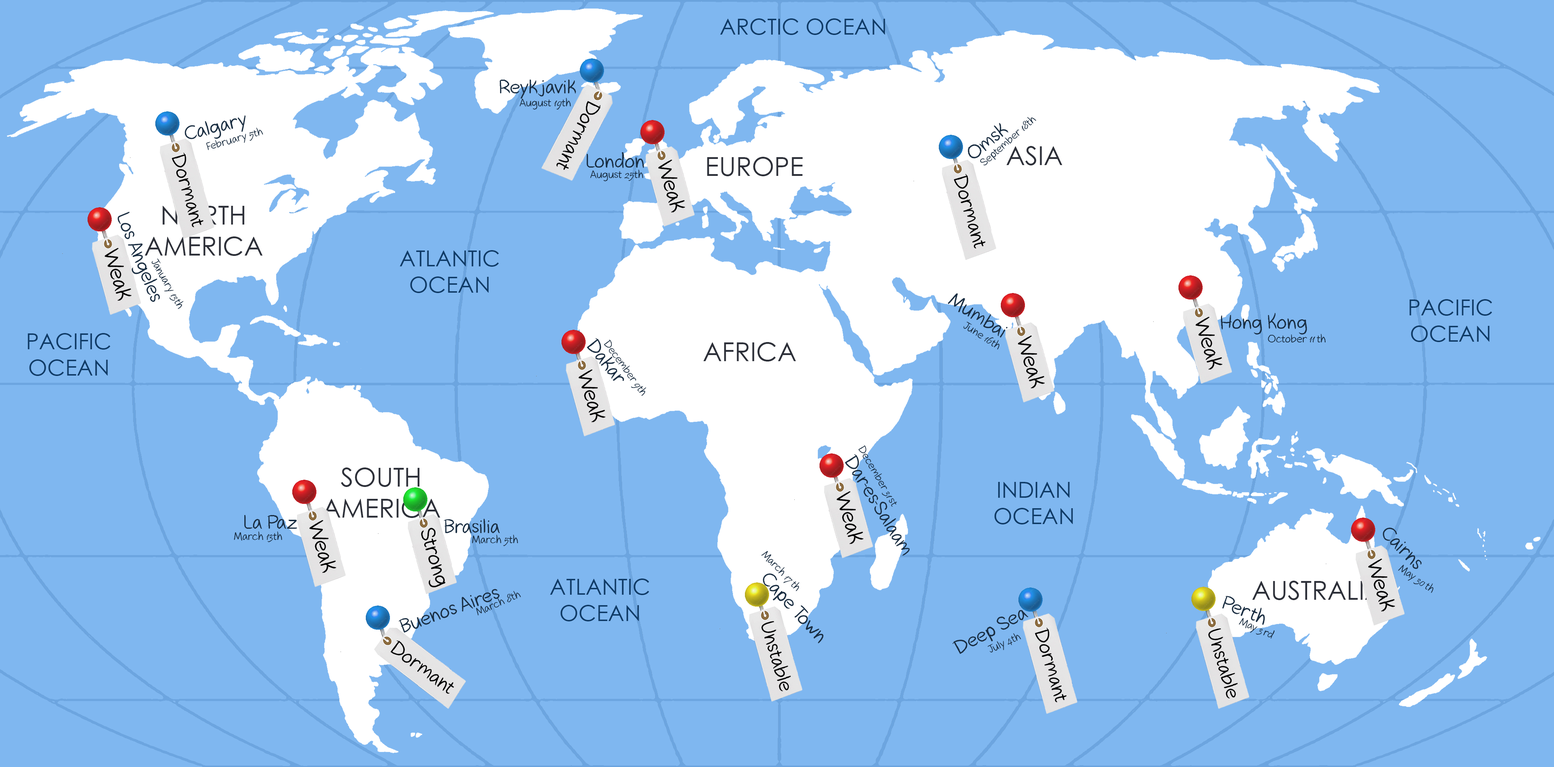
<style>
.page{position:relative;width:1554px;height:767px;background:#7fb7f0}
.page>*{position:absolute;margin:0}
.t1{font:22px "CenturyGothic";color:#0f3b67}
.t2{font:19.5px "GavinScript2";color:#182d42}
.t3{font:10.8px "GavinScript2";color:#182d42}
.t4{font:10.8px "Pristina-Regular";color:#182d42}
.t5{font:20px "GavinScript2";color:#000000}
.t6{font:19.4px "GavinScript2";color:#182d42}
.t7{font:10.7px "GavinScript2";color:#182d42}
.t8{font:10.7px "Pristina-Regular";color:#182d42}
.t9{font:26px "CenturyGothic";color:#2d3039}
.t10{font:19.8px "GavinScript2";color:#000000}
.t11{font:21.9px "GavinScript2";color:#000000}
.t12{font:19.6px "GavinScript2";color:#182d42}
.t13{font:10.9px "GavinScript2";color:#182d42}
.t14{font:10.9px "Pristina-Regular";color:#182d42}
.t15{font:19.3px "GavinScript2";color:#182d42}
.t16{font:20.9px "GavinScript2";color:#000000}
</style>
<div class="page">
<p class="t1" style="left:720px;top:18px;width:165px;height:17px">ARCTIC OCEAN</p>
<p class="t2" style="left:500px;top:79px;width:76px;height:20px">Reykjavik</p>
<p class="t3" style="left:519px;top:98px;width:52px;height:12px">August <span class="t4">19</span>th</p>
<p class="t5" style="left:556px;top:101px;width:45px;height:69px;rotate:116deg">Dormant</p>
<p class="t6" style="left:185px;top:115px;width:61px;height:25px;rotate:-15deg">Calgary</p>
<p class="t2" style="left:968px;top:123px;width:41px;height:36px;rotate:-40deg">Omsk</p>
<p class="t3" style="left:980px;top:117px;width:57px;height:48px;rotate:-42deg">September <span class="t4">18</span>th</p>
<p class="t7" style="left:206px;top:128px;width:57px;height:22px;rotate:-16deg">February <span class="t8">5</span>th</p>
<p class="t9" style="left:1006px;top:146px;width:57px;height:19px">ASIA</p>
<p class="t10" style="left:172px;top:152px;width:32px;height:75px;rotate:73deg">Dormant</p>
<p class="t2" style="left:587px;top:152px;width:57px;height:16px">London</p>
<p class="t11" style="left:658px;top:159px;width:27px;height:54px;rotate:73deg">Weak</p>
<p class="t9" style="left:707px;top:157px;width:96px;height:19px">EUROPE</p>
<p class="t3" style="left:590px;top:169px;width:53px;height:12px">August <span class="t4">25</span>th</p>
<p class="t10" style="left:954px;top:174px;width:32px;height:75px;rotate:73deg">Dormant</p>
<p class="t9" style="left:145px;top:205px;width:118px;height:51px;text-align:center">NORTH<br>AMERICA</p>
<p class="t12" style="left:118px;top:212px;width:42px;height:90px;rotate:68deg">Los Angeles</p>
<p class="t11" style="left:105px;top:248px;width:27px;height:53px;rotate:73deg">Weak</p>
<p class="t1" style="left:400px;top:250px;width:99px;height:43px;text-align:center">ATLANTIC<br>OCEAN</p>
<p class="t3" style="left:151px;top:258px;width:32px;height:51px;rotate:60deg">January <span class="t4">13</span>th</p>
<p class="t6" style="left:948px;top:293px;width:60px;height:45px;rotate:33deg">Mumbai</p>
<p class="t1" style="left:1410px;top:299px;width:82px;height:43px;text-align:center">PACIFIC<br>OCEAN</p>
<p class="t11" style="left:1196px;top:317px;width:27px;height:53px;rotate:73deg">Weak</p>
<p class="t2" style="left:1221px;top:313px;width:86px;height:22px">Hong Kong</p>
<p class="t13" style="left:964px;top:322px;width:36px;height:28px;rotate:32deg">June <span class="t14">16</span>th</p>
<p class="t1" style="left:28px;top:333px;width:82px;height:43px;text-align:center">PACIFIC<br>OCEAN</p>
<p class="t2" style="left:587px;top:338px;width:37px;height:43px;rotate:52deg">Dakar</p>
<p class="t3" style="left:604px;top:339px;width:42px;height:57px;rotate:54deg">December <span class="t4">9</span>th</p>
<p class="t11" style="left:1018px;top:335px;width:27px;height:54px;rotate:73deg">Weak</p>
<p class="t3" style="left:1268px;top:334px;width:58px;height:8px">October <span class="t4">11 </span>th</p>
<p class="t9" style="left:703px;top:342px;width:93px;height:20px">AFRICA</p>
<p class="t11" style="left:579px;top:369px;width:27px;height:53px;rotate:73deg">Weak</p>
<p class="t3" style="left:859px;top:445px;width:38px;height:62px;rotate:60deg">December <span class="t4">31 </span>st</p>
<p class="t15" style="left:845px;top:454px;width:65px;height:102px;rotate:58deg">Dar-es-Salaam</p>
<p class="t9" style="left:322px;top:468px;width:119px;height:50px;text-align:center">SOUTH<br>AMERICA</p>
<p class="t1" style="left:995px;top:482px;width:78px;height:43px;text-align:center">INDIAN<br>OCEAN</p>
<p class="t11" style="left:837px;top:491px;width:27px;height:53px;rotate:73deg">Weak</p>
<p class="t2" style="left:244px;top:515px;width:53px;height:14px">La Paz</p>
<p class="t11" style="left:309px;top:520px;width:27px;height:53px;rotate:73deg">Weak</p>
<p class="t2" style="left:444px;top:519px;width:56px;height:14px">Brasilia</p>
<p class="t3" style="left:234px;top:531px;width:48px;height:11px">March <span class="t4">13</span>th</p>
<p class="t16" style="left:421px;top:528px;width:25px;height:60px;rotate:73deg">Strong</p>
<p class="t12" style="left:1383px;top:527px;width:39px;height:42px;rotate:46deg">Cairns</p>
<p class="t3" style="left:472px;top:535px;width:46px;height:11px">March <span class="t4">5</span>th</p>
<p class="t3" style="left:761px;top:551px;width:39px;height:41px;rotate:46deg">March <span class="t4">17 </span>th</p>
<p class="t11" style="left:1368px;top:558px;width:27px;height:54px;rotate:73deg">Weak</p>
<p class="t3" style="left:1398px;top:565px;width:36px;height:28px;rotate:34deg">May <span class="t4">30 </span>th</p>
<p class="t1" style="left:550px;top:579px;width:99px;height:42px;text-align:center">ATLANTIC<br>OCEAN</p>
<p class="t6" style="left:763px;top:573px;width:61px;height:70px;rotate:47deg">Cape Town</p>
<p class="t9" style="left:1252px;top:581px;width:132px;height:19px">AUSTRALIA</p>
<p class="t2" style="left:399px;top:589px;width:101px;height:44px;rotate:-20deg">Buenos Aires</p>
<p class="t3" style="left:476px;top:591px;width:45px;height:25px;rotate:-24deg">March <span class="t4">8</span>th</p>
<p class="t12" style="left:1222px;top:596px;width:43px;height:29px;rotate:22deg">Perth</p>
<p class="t6" style="left:952px;top:610px;width:77px;height:44px;rotate:-28deg">Deep Sea</p>
<p class="t13" style="left:1239px;top:618px;width:36px;height:21px;rotate:24deg">May <span class="t14">3 </span>rd</p>
<p class="t10" style="left:761px;top:621px;width:30px;height:70px;rotate:73deg">Unstable</p>
<p class="t10" style="left:1035px;top:628px;width:32px;height:75px;rotate:73deg">Dormant</p>
<p class="t10" style="left:1208px;top:628px;width:30px;height:71px;rotate:73deg">Unstable</p>
<p class="t10" style="left:390px;top:640px;width:64px;height:54px;rotate:36deg">Dormant</p>
<p class="t3" style="left:988px;top:633px;width:34px;height:20px;rotate:-25deg">July <span class="t4">4</span>th</p>
</div>
